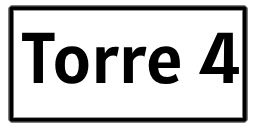
<style>
.page{position:relative;width:256px;height:128px;background:#ffffff}
.page>*{position:absolute;margin:0}
.t1{font:72px "Alatsi-Regular";color:#000000}
</style>
<div class="page">
<p class="t1" style="left:22px;top:32px;width:217px;height:52px">Torre 4</p>
</div>
